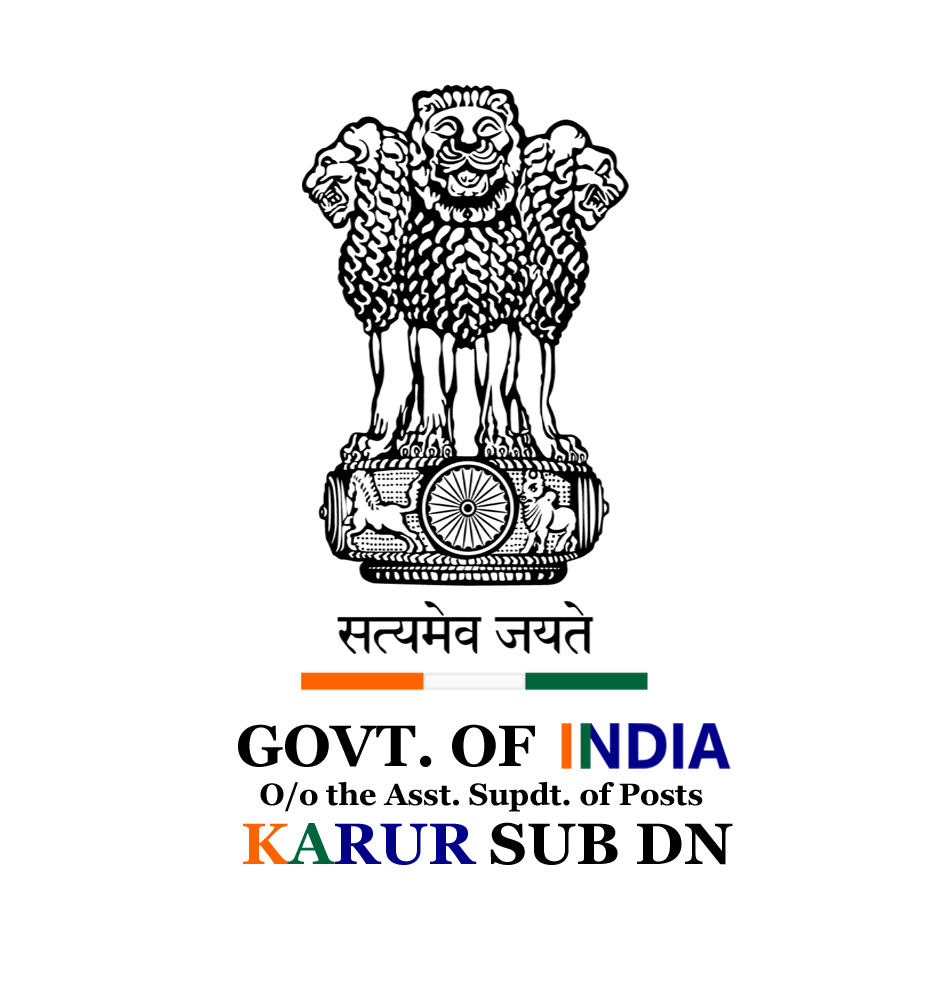
<style>
.page{position:relative;width:952px;height:981px;background:#ffffff}
.page>*{position:absolute;margin:0}
.t1{font:58.3px "Georgia-Bold";color:#000000}
.t2{font:30.6px "Georgia-Bold";color:#000000}
.t3{font:58.3px "Georgia-Bold";color:#fe6300}
.t4{font:58.3px "Georgia-Bold";color:#00643c}
.t5{font:58.3px "Georgia-Bold";color:#000088}
</style>
<div class="page">
<p class="t1" style="left:238px;top:724px;width:297px;height:43px">GOVT. OF</p>
<p class="t2" style="left:260px;top:782px;width:443px;height:30px">O/o the Asst. Supdt. of Posts</p>
<p class="t1" style="left:243px;top:822px;width:490px;height:43px"><span class="t3">K</span><span class="t4">A</span><span class="t5">RUR</span> SUB DN</p>
</div>
